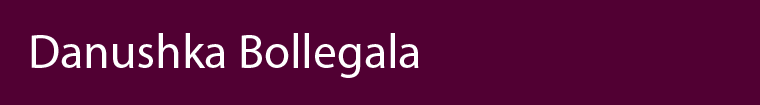
<style>
.page{position:relative;width:760px;height:105px;background:#510033}
.page>*{position:absolute;margin:0}
.t1{font:48px "MyriadPro-Regular";color:#ffffff}
</style>
<div class="page">
<p class="t1" style="left:31px;top:33px;width:388px;height:45px">Danushka Bollegala</p>
</div>
